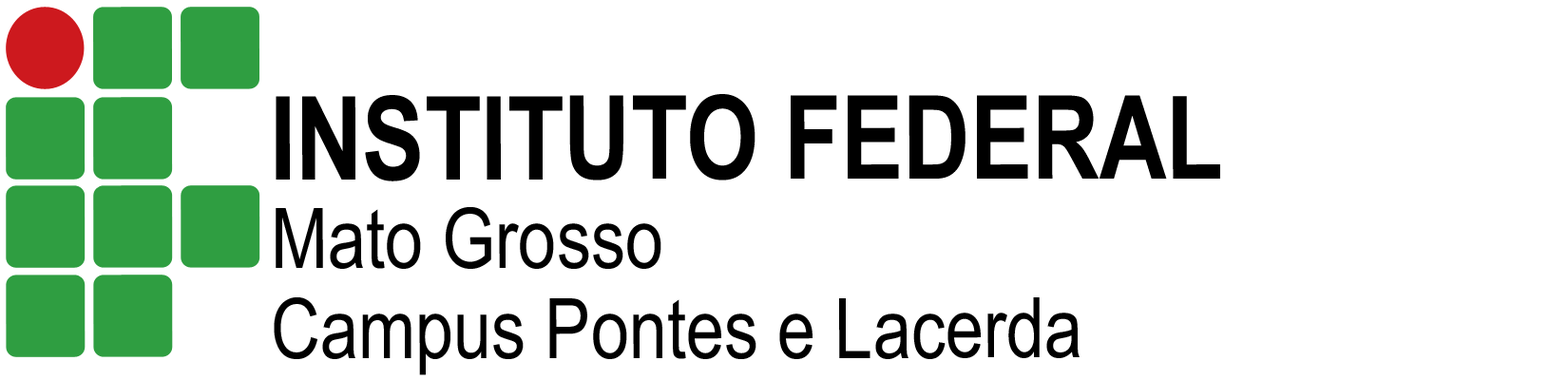
<style>
.page{position:relative;width:1568px;height:380px;background:#ffffff}
.page>*{position:absolute;margin:0}
.t1{font:115.9px "ArialNarrow-Bold";color:#000000}
.t2{font:83.6px "ArialNarrow";color:#000000}
</style>
<div class="page">
<p class="t1" style="left:276px;top:94px;width:944px;height:88px">INSTITUTO FEDERAL</p>
<p class="t2" style="left:276px;top:207px;width:385px;height:62px">Mato Grosso</p>
<p class="t2" style="left:274px;top:297px;width:806px;height:78px">Campus Pontes e Lacerda</p>
</div>
